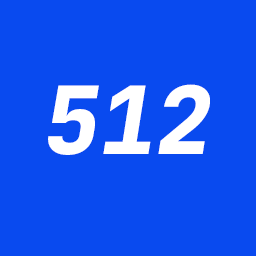
<style>
.page{position:relative;width:256px;height:256px;background:#094aef}
.page>*{position:absolute;margin:0}
.t1{font:93.7px "JetBrainsMono-ExtraBoldItalic";color:#ffffff}
</style>
<div class="page">
<p class="t1" style="left:48px;top:84px;width:162px;height:71px">512</p>
</div>
